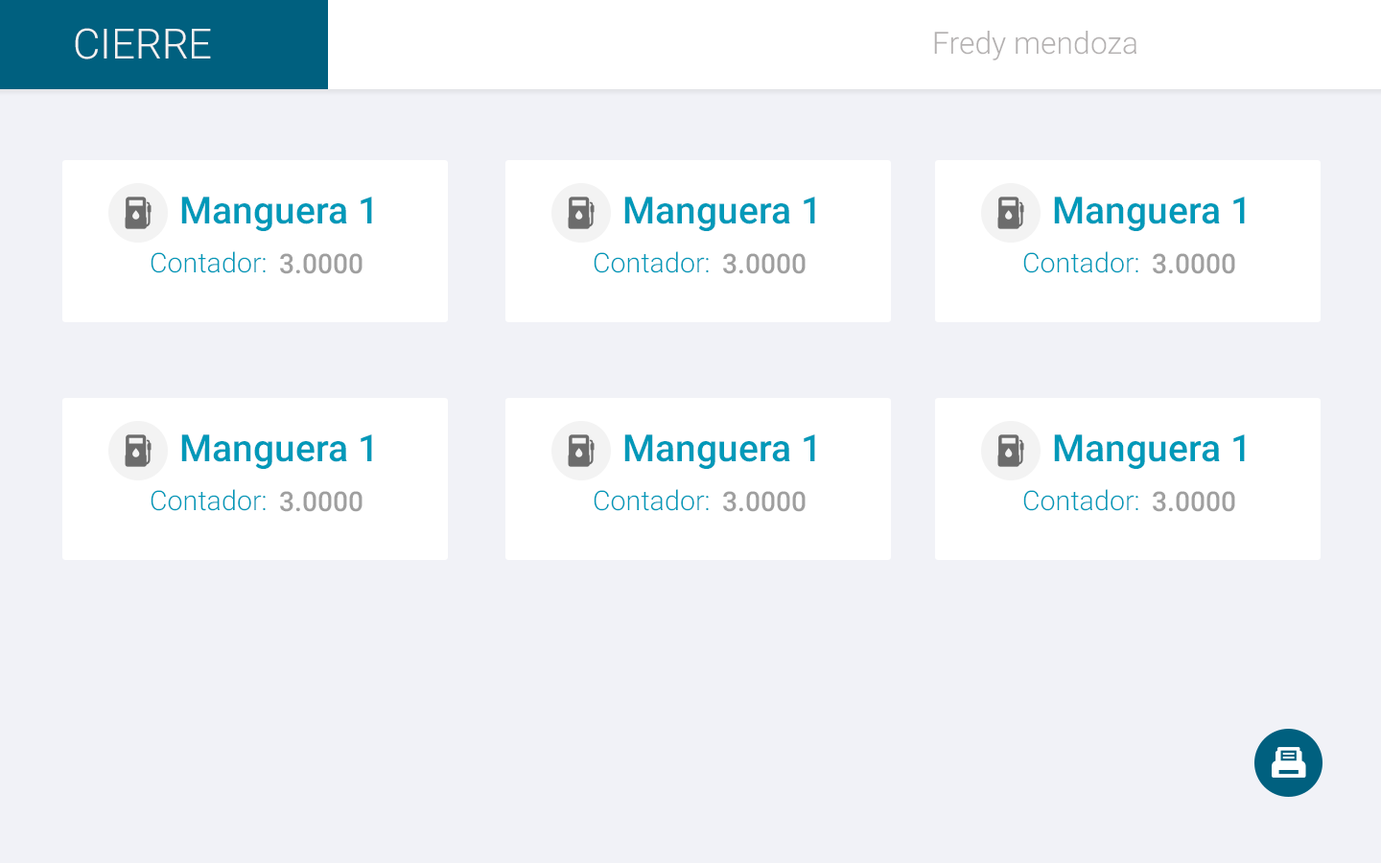
<style>
.page{position:relative;width:1381px;height:863px;background:#f1f2f7}
.page>*{position:absolute;margin:0}
.t1{font:41.7px "Roboto-Light";color:#f3f3f3}
.t2{font:30.7px "Roboto-Light";color:#b4b1b1}
.t3{font:37.5px "Roboto-Medium";color:#0099b9}
.t4{font:27.2px "Roboto-Light";color:#0099b9}
.t5{font:27.2px "Roboto-Medium";color:#9f9f9f}
</style>
<div class="page">
<p class="t1" style="left:75px;top:28px;width:136px;height:31px">CIERRE</p>
<p class="t2" style="left:934px;top:31px;width:203px;height:29px">Fredy mendoza</p>
<p class="t3" style="left:181px;top:197px;width:191px;height:34px">Manguera 1</p>
<p class="t3" style="left:624px;top:197px;width:191px;height:34px">Manguera 1</p>
<p class="t3" style="left:1054px;top:197px;width:191px;height:34px">Manguera 1</p>
<p class="t4" style="left:151px;top:251px;width:115px;height:22px">Contador:</p>
<p class="t5" style="left:280px;top:253px;width:83px;height:21px">3.0000</p>
<p class="t4" style="left:594px;top:251px;width:115px;height:22px">Contador:</p>
<p class="t5" style="left:723px;top:253px;width:83px;height:21px">3.0000</p>
<p class="t4" style="left:1023px;top:251px;width:116px;height:22px">Contador:</p>
<p class="t5" style="left:1153px;top:253px;width:82px;height:21px">3.0000</p>
<p class="t3" style="left:181px;top:435px;width:191px;height:34px">Manguera 1</p>
<p class="t3" style="left:624px;top:435px;width:191px;height:34px">Manguera 1</p>
<p class="t3" style="left:1054px;top:435px;width:191px;height:34px">Manguera 1</p>
<p class="t4" style="left:151px;top:489px;width:115px;height:22px">Contador:</p>
<p class="t5" style="left:280px;top:491px;width:83px;height:21px">3.0000</p>
<p class="t4" style="left:594px;top:489px;width:115px;height:22px">Contador:</p>
<p class="t5" style="left:723px;top:491px;width:83px;height:21px">3.0000</p>
<p class="t4" style="left:1023px;top:489px;width:116px;height:22px">Contador:</p>
<p class="t5" style="left:1153px;top:491px;width:82px;height:21px">3.0000</p>
</div>
